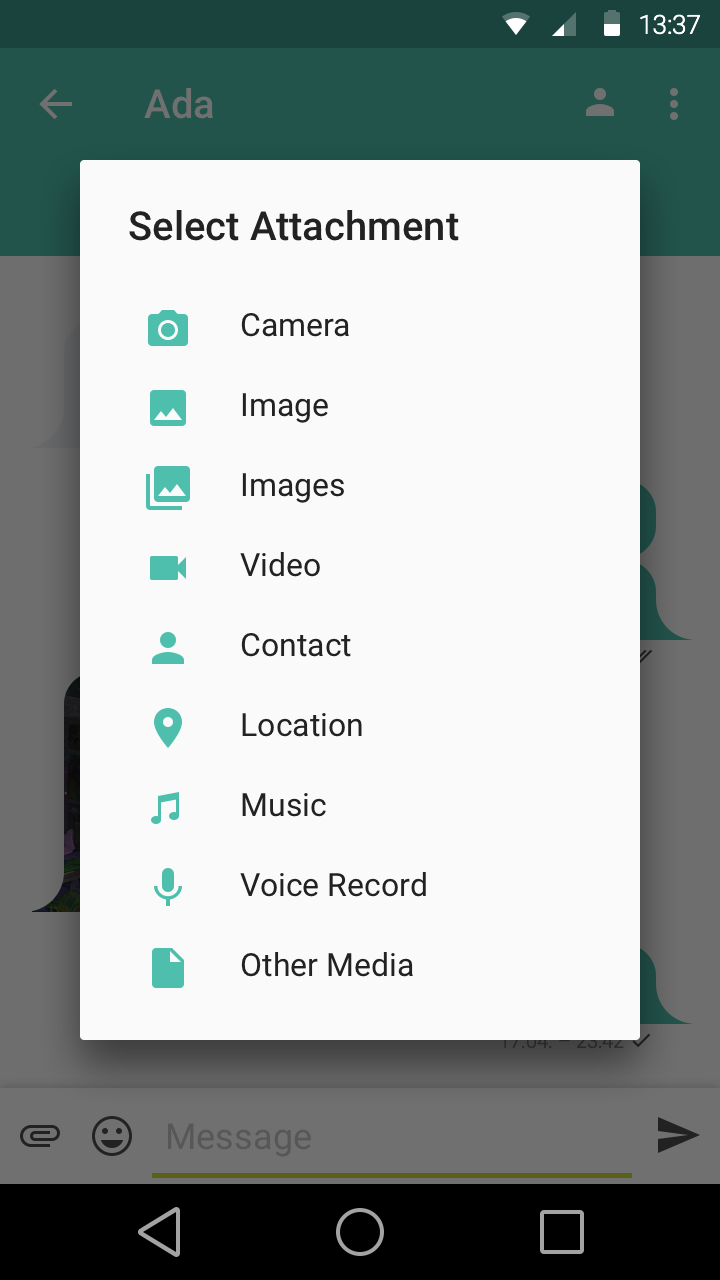
<style>
.page{position:relative;width:720px;height:1280px;background:#fafafa}
.page>*{position:absolute;margin:0}
.t1{font:40px "Roboto-Medium";color:#707070}
.t2{font:40px "Roboto-Medium";color:#222222}
.t3{font:32px/80px "Roboto-Regular";color:#222222}
.t4{font:36px "Roboto-Regular";color:#575757}
</style>
<div class="page">
<p class="t1" style="left:144px;top:88px;width:69px;height:31px">Ada</p>
<p class="t2" style="left:129px;top:210px;width:330px;height:31px">Select Attachment</p>
<p class="t3" style="left:240px;top:313px;width:186px;height:664px">Camera<br>Image<br>Images<br>Video<br>Contact<br>Location<br>Music<br>Voice Record<br>Other Media</p>
<p class="t4" style="left:168px;top:1123px;width:143px;height:34px">Message</p>
</div>
